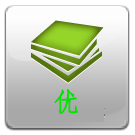
<style>
.page{position:relative;width:135px;height:135px}
.page>*{position:absolute;margin:0}
.t1{font:26px "STFangsong";letter-spacing:0.1em;color:#00e400;font-weight:bold}
</style>
<div class="page">
<p class="t1" style="left:54px;top:89px;width:24px;height:25px">优</p>
</div>
